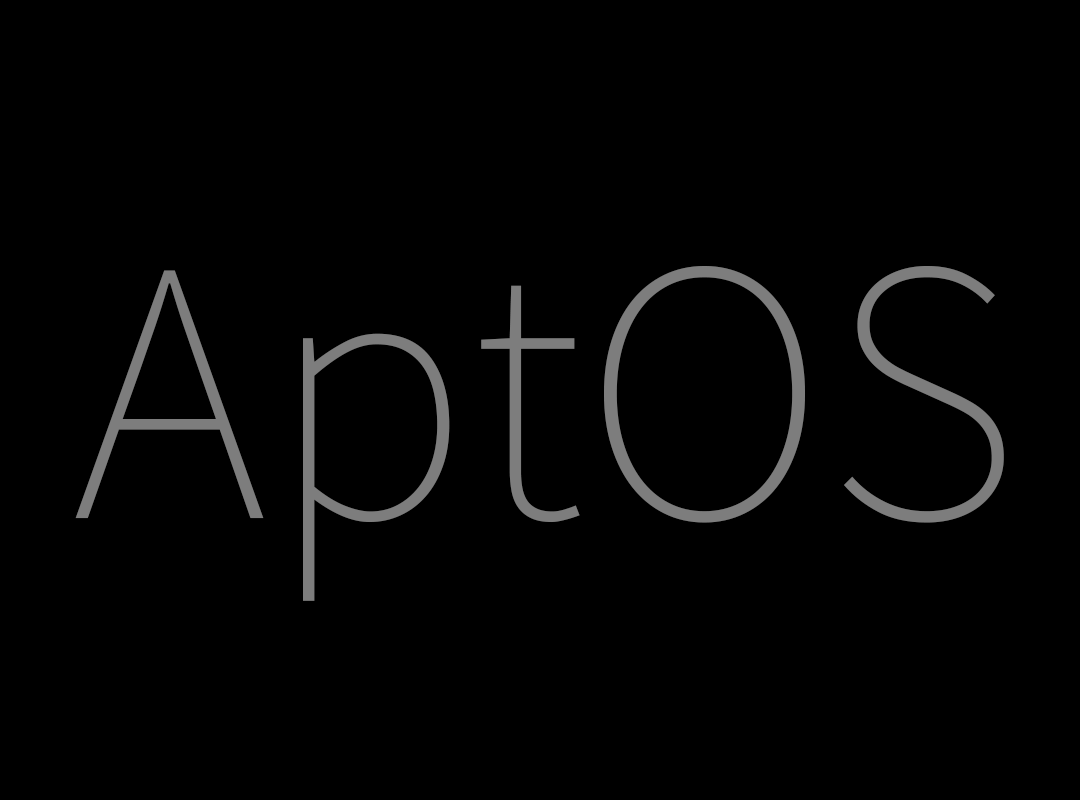
<style>
.page{position:relative;width:1080px;height:800px;background:#000000}
.page>*{position:absolute;margin:0}
.t1{font:375px "SourceSansPro-ExtraLight";color:#7d7d7d}
</style>
<div class="page">
<p class="t1" style="left:75px;top:266px;width:929px;height:335px">AptOS</p>
</div>
